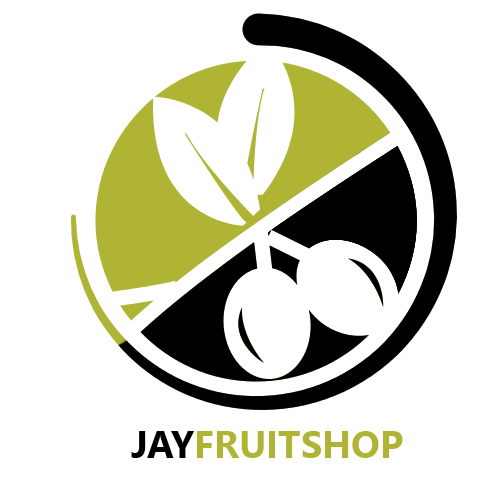
<style>
.page{position:relative;width:500px;height:500px;background:#ffffff}
.page>*{position:absolute;margin:0}
.t1{font:38px "Leelawadee-Bold";color:#b0b435}
.t2{font:38px "Leelawadee-Bold";color:#000000}
</style>
<div class="page">
<p class="t1" style="left:131px;top:431px;width:272px;height:27px"><span class="t2">JAY</span>FRUITSHOP</p>
</div>
